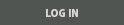
<style>
.page{position:relative;width:124px;height:25px;background:#505551}
.page>*{position:absolute;margin:0}
.t1{font:11px "MyriadHebrew-Bold";color:#dad6d6}
</style>
<div class="page">
<p class="t1" style="left:46px;top:9px;width:32px;height:8px">LOG IN</p>
</div>
